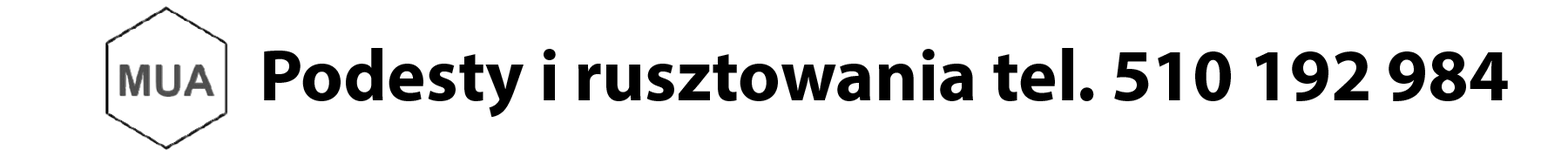
<style>
.page{position:relative;width:1568px;height:157px;background:#ffffff}
.page>*{position:absolute;margin:0}
.t1{font:73.8px "MyriadPro-Bold";color:#000000}
</style>
<div class="page">
<p class="t1" style="left:264px;top:48px;width:1244px;height:70px">Podesty i rusztowania tel. 510 192 984</p>
</div>
